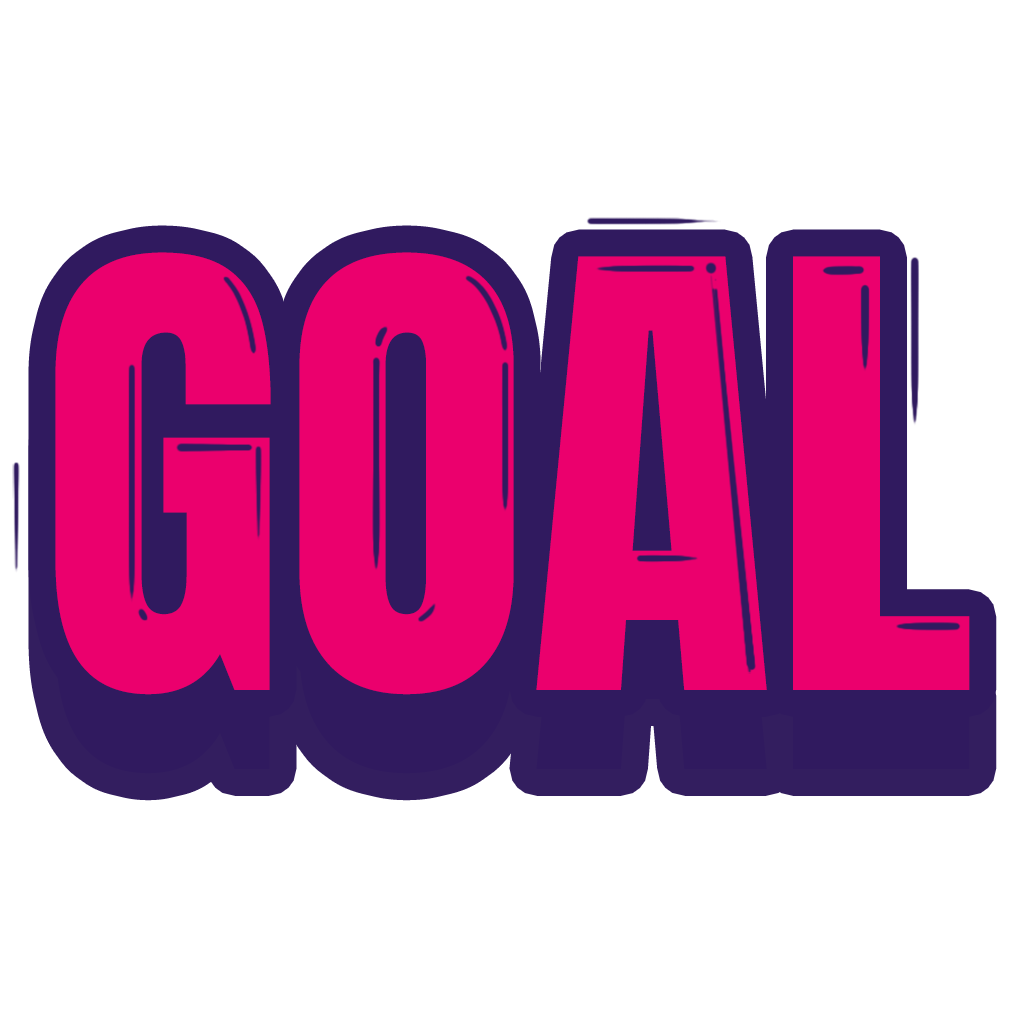
<style>
.page{position:relative;width:1024px;height:1024px;background:#ffffff}
.page>*{position:absolute;margin:0}
.t1{font:504.4px "Anton-Regular";color:#eb006d;text-transform:uppercase}
.t2{font:504.4px "Anton-Regular";text-transform:uppercase}
</style>
<div class="page">
<p class="t1" style="left:55px;top:252px;width:915px;height:443px">GOAL</p>
<p class="t2" style="left:55px;top:331px;width:915px;height:443px">GOAL</p>
</div>
